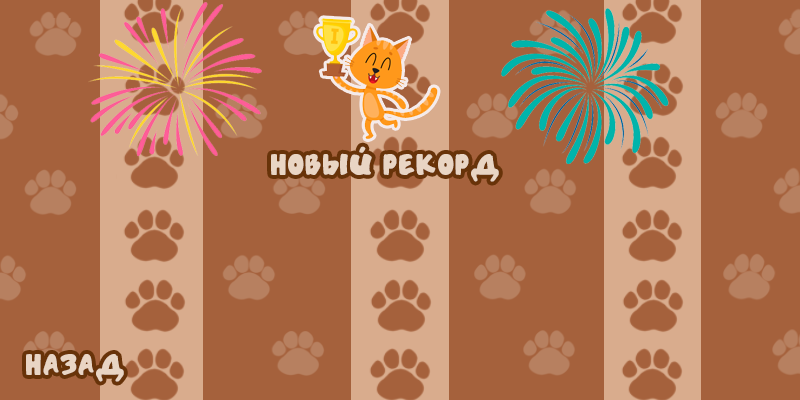
<style>
.page{position:relative;width:800px;height:400px;background:#a5613c}
.page>*{position:absolute;margin:0}
.t1{font:24px "HandSound";color:#e9d5c4}
</style>
<div class="page">
<p class="t1" style="left:271px;top:146px;width:228px;height:36px">Новый рекорд</p>
<p class="t1" style="left:26px;top:354px;width:98px;height:28px">Назад</p>
</div>
